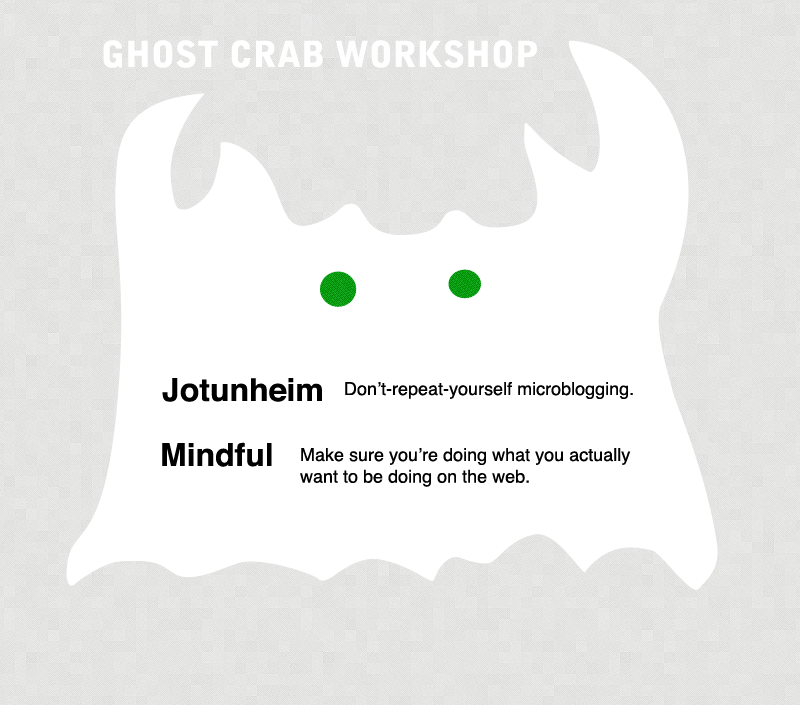
<style>
.page{position:relative;width:800px;height:705px;background:#ffffff}
.page>*{position:absolute;margin:0}
.t1{font:35.6px "BellGothicStd-Black";color:#ffffff}
.t2{font:31.7px "Helvetica-Bold";color:#000000}
.t3{font:17.8px "Helvetica";color:#000000}
</style>
<div class="page">
<p class="t1" style="left:103px;top:40px;width:434px;height:28px">GHOST CRAB WORKSHOP</p>
<p class="t2" style="left:162px;top:378px;width:160px;height:24px">Jotunheim</p>
<p class="t3" style="left:345px;top:382px;width:288px;height:17px">Don’t-repeat-yourself microblogging.</p>
<p class="t2" style="left:162px;top:442px;width:110px;height:25px">Mindful</p>
<p class="t3" style="left:300px;top:448px;width:331px;height:39px">Make sure you’re doing what you actually<br>want to be doing on the web.</p>
</div>
